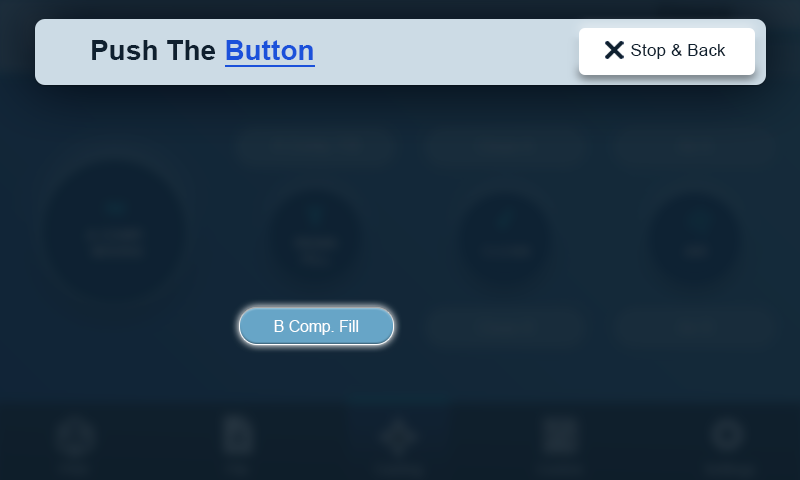
<style>
.page{position:relative;width:800px;height:480px}
.page>*{position:absolute;margin:0}
.t1{font:27.8px "Arial-BoldMT";letter-spacing:0.01em;color:#0f202f}
.t2{font:27.8px "Arial-BoldMT";letter-spacing:0.01em;color:#1b51da}
.t3{font:17.1px "ArialMT";letter-spacing:0.01em;color:#0f202f}
.t4{font:15.6px "ArialMT";color:#ffffff}
</style>
<div class="page">
<p class="t1" style="left:92px;top:40px;width:221px;height:20px">Push The <span class="t2">Button</span></p>
<p class="t3" style="left:631px;top:44px;width:95px;height:15px">Stop &amp; Back</p>
<p class="t4" style="left:274px;top:320px;width:85px;height:15px">B Comp. Fill</p>
</div>
